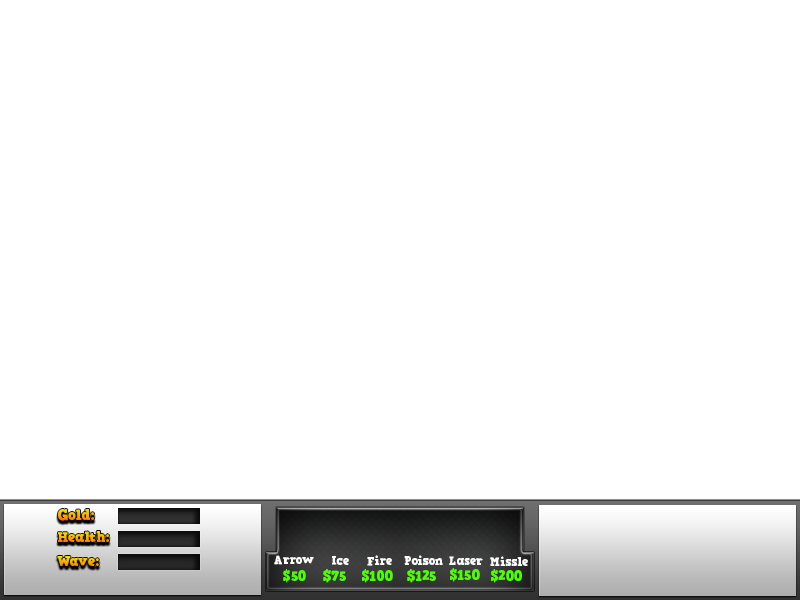
<style>
.page{position:relative;width:800px;height:600px;background:#ffffff}
.page>*{position:absolute;margin:0}
.t1{font:14.1px "HVDComicSerifPro"}
.t2{font:12.1px "HVDComicSerifPro";color:#ffffff}
.t3{font:14.1px "HVDComicSerifPro";color:#4eff00}
</style>
<div class="page">
<p class="t1" style="left:58px;top:509px;width:36px;height:12px">Gold:</p>
<p class="t1" style="left:58px;top:531px;width:51px;height:11px">Health:</p>
<p class="t1" style="left:57px;top:556px;width:42px;height:10px">Wave:</p>
<p class="t2" style="left:274px;top:555px;width:40px;height:10px">Arrow</p>
<p class="t2" style="left:332px;top:556px;width:17px;height:9px">Ice</p>
<p class="t2" style="left:367px;top:555px;width:25px;height:11px">Fire</p>
<p class="t2" style="left:404px;top:555px;width:39px;height:10px">Poison</p>
<p class="t2" style="left:449px;top:556px;width:34px;height:9px">Laser</p>
<p class="t2" style="left:490px;top:556px;width:38px;height:10px">Missle</p>
<p class="t3" style="left:283px;top:569px;width:23px;height:14px">$50</p>
<p class="t3" style="left:323px;top:569px;width:23px;height:14px">$75</p>
<p class="t3" style="left:362px;top:569px;width:31px;height:14px">$100</p>
<p class="t3" style="left:407px;top:569px;width:29px;height:14px">$125</p>
<p class="t3" style="left:450px;top:568px;width:30px;height:14px">$150</p>
<p class="t3" style="left:491px;top:569px;width:31px;height:14px">$200</p>
</div>
